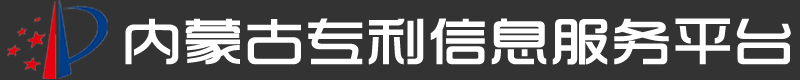
<style>
.page{position:relative;width:800px;height:80px;background:#333333}
.page>*{position:absolute;margin:0}
.t1{font:54.2px "TRENDS";color:#ffffff;font-weight:bold;scale:1.1 1}
</style>
<div class="page">
<p class="t1" style="left:125px;top:18px;width:666px;height:47px">内蒙古专利信息服务平台</p>
</div>
